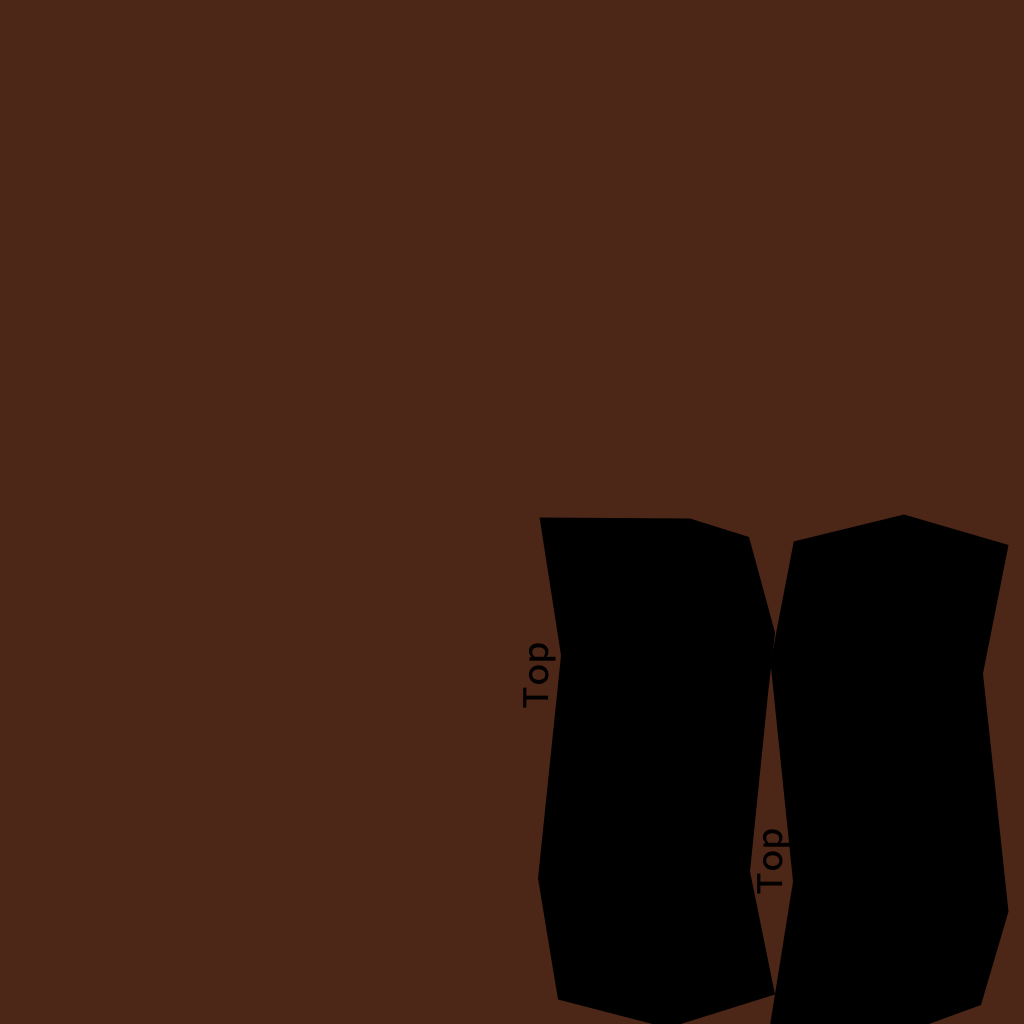
<style>
.page{position:relative;width:1024px;height:1024px;background:#4c2616}
.page>*{position:absolute;margin:0}
.t1{font:37.9px "SourceCodePro-Medium";color:#000000}
</style>
<div class="page">
<p class="t1" style="left:523px;top:643px;width:33px;height:65px;rotate:-90deg">Top</p>
<p class="t1" style="left:757px;top:829px;width:33px;height:65px;rotate:-90deg">Top</p>
</div>
